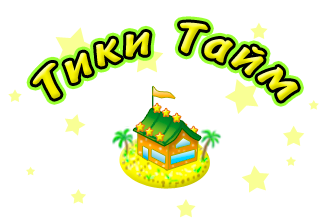
<style>
.page{position:relative;width:320px;height:220px;background:#ffffff}
.page>*{position:absolute;margin:0}
.t1{font:48px "BrushType-Bold";letter-spacing:0.075em;font-style:italic}
</style>
<div class="page">
<p class="t1" style="left:32px;top:22px;width:266px;height:79px">Òèêè Òàéì</p>
</div>
